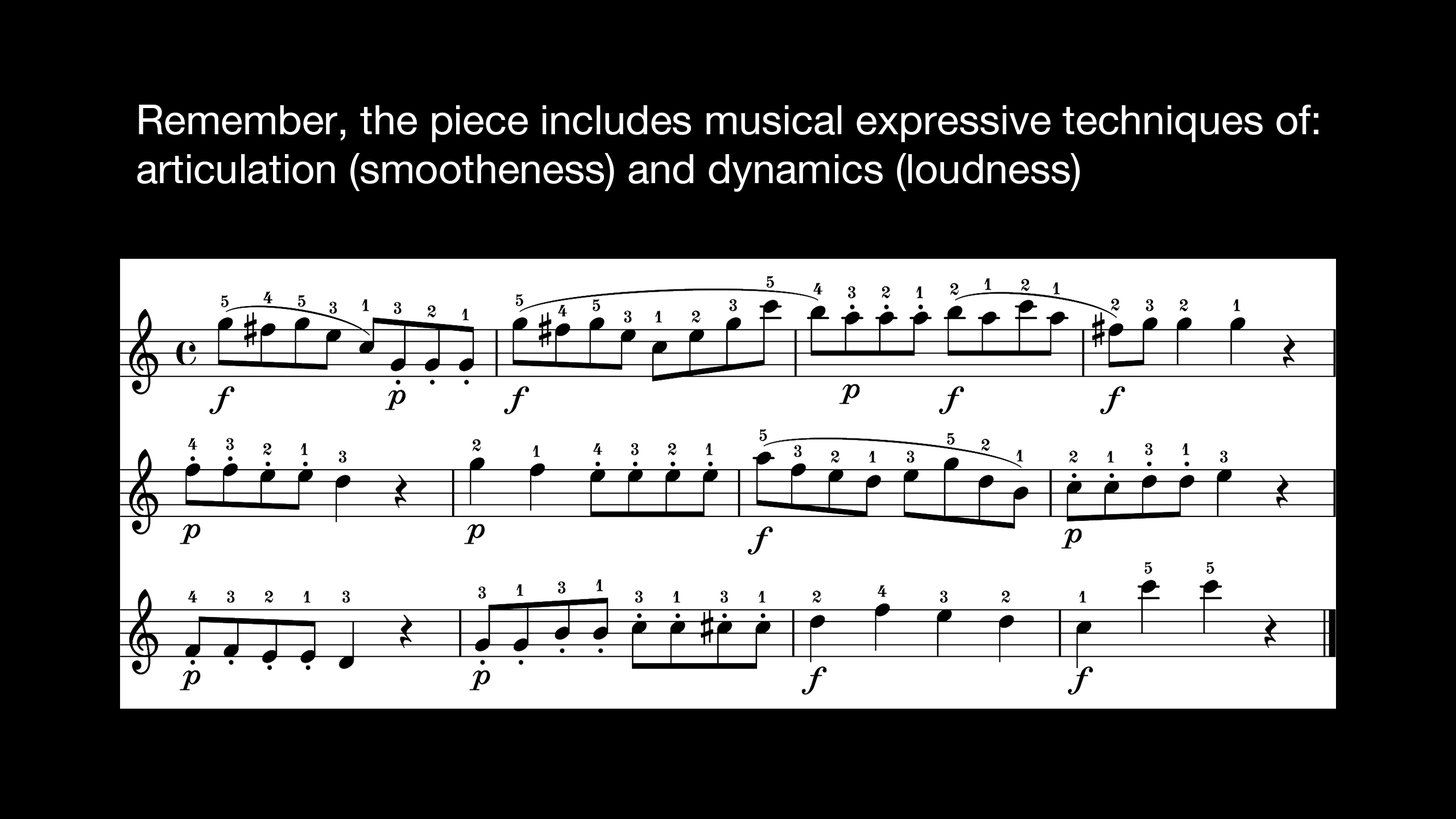
<style>
.page{position:relative;width:1456px;height:819px;background:#000000}
.page>*{position:absolute;margin:0}
.t1{font:40.9px "HelveticaNeue";color:#ffffff}
</style>
<div class="page">
<p class="t1" style="left:137px;top:105px;width:1181px;height:87px">Remember, the piece includes musical expressive techniques of:<br>articulation (smootheness) and dynamics (loudness)</p>
</div>
